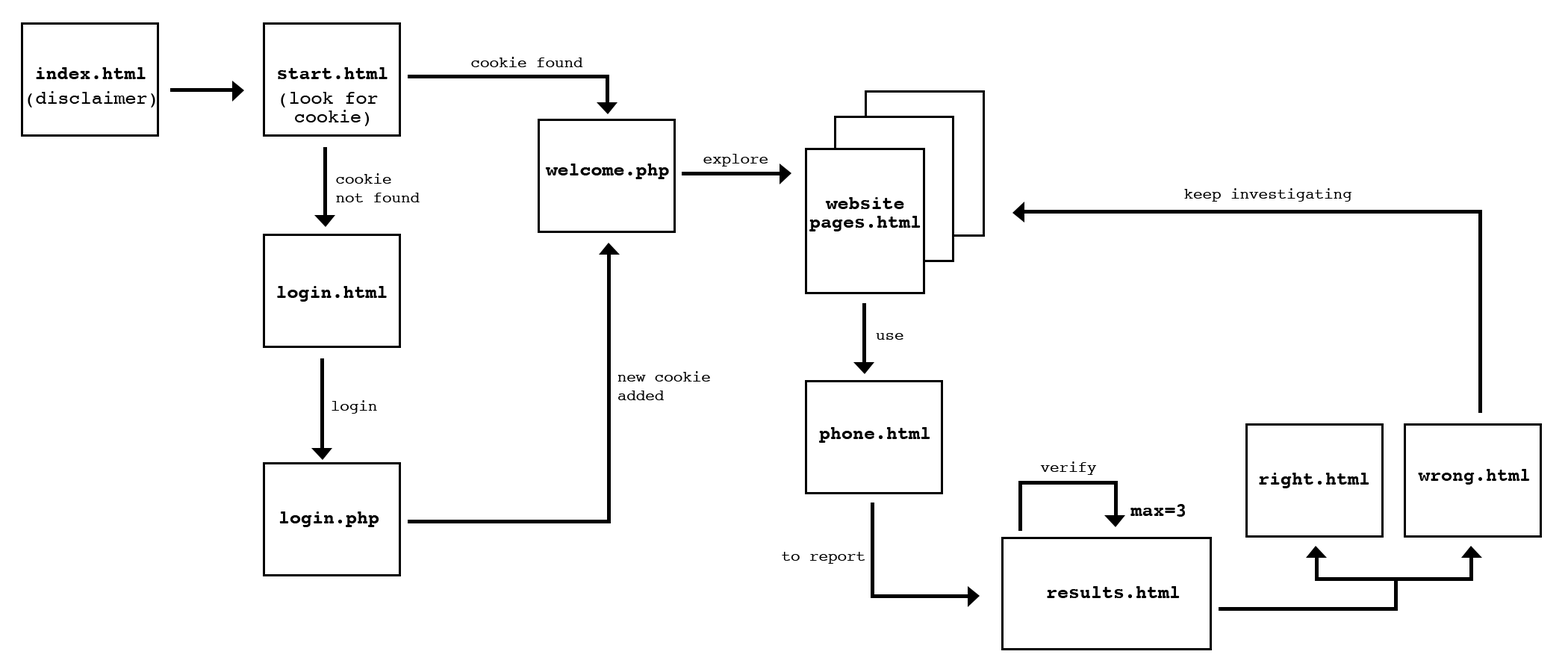
<style>
.page{position:relative;width:1568px;height:672px;background:#ffffff}
.page>*{position:absolute;margin:0}
.t1{font:15.6px "Courier";color:#000000}
.t2{font:18.7px "Courier-Bold";color:#000000}
.t3{font:18.7px "Courier";color:#000000}
.t4{font:18.7px/18.7px "Courier";color:#000000}
.t5{font:15.6px/18.7px "Courier";color:#000000}
.t6{font:18.7px/18.7px "Courier-Bold";color:#000000}
.t7{font:15.6px/155.6px "Courier";color:#000000}
</style>
<div class="page">
<p class="t1" style="left:471px;top:57px;width:112px;height:10px">cookie found</p>
<p class="t2" style="left:36px;top:67px;width:110px;height:12px">index.html</p>
<p class="t2" style="left:278px;top:67px;width:110px;height:12px">start.html</p>
<p class="t3" style="left:28px;top:91px;width:127px;height:17px">(disclaimer)</p>
<p class="t4" style="left:281px;top:92px;width:97px;height:34px;text-align:center">(look for <br>cookie)</p>
<p class="t1" style="left:703px;top:154px;width:65px;height:13px">explore</p>
<p class="t5" style="left:336px;top:173px;width:84px;height:29px">cookie <br>not found</p>
<p class="t2" style="left:545px;top:164px;width:124px;height:15px">welcome.php</p>
<p class="t6" style="left:809px;top:197px;width:112px;height:34px;text-align:center">website<br>pages.html</p>
<p class="t1" style="left:1184px;top:188px;width:167px;height:14px">keep investigating</p>
<p class="t2" style="left:277px;top:286px;width:110px;height:16px">login.html</p>
<p class="t1" style="left:876px;top:333px;width:27px;height:7px">use</p>
<p class="t7" style="left:617px;top:371px;width:93px;height:29px">new cookie<span class="t5"><br>added</span></p>
<p class="t1" style="left:332px;top:400px;width:45px;height:14px">login</p>
<p class="t2" style="left:819px;top:427px;width:111px;height:16px">phone.html</p>
<p class="t1" style="left:1040px;top:461px;width:56px;height:14px">verify</p>
<p class="t2" style="left:1259px;top:473px;width:110px;height:15px">right.html</p>
<p class="t2" style="left:1418px;top:469px;width:112px;height:16px">wrong.html</p>
<p class="t2" style="left:1130px;top:504px;width:55px;height:13px">max=3</p>
<p class="t2" style="left:279px;top:511px;width:100px;height:16px">login.php</p>
<p class="t1" style="left:782px;top:552px;width:83px;height:12px">to report</p>
<p class="t2" style="left:1047px;top:586px;width:133px;height:12px">results.html</p>
</div>
